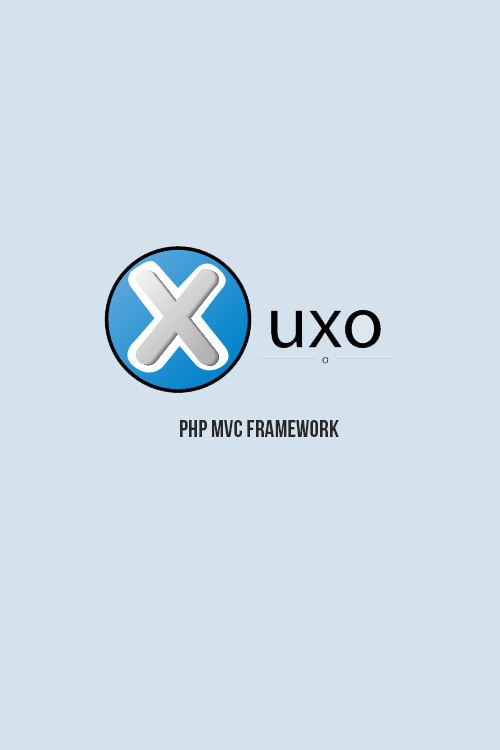
<style>
.page{position:relative;width:500px;height:750px;background:#d4e2ed}
.page>*{position:absolute;margin:0}
.t1{font:24px "BebasNeue";color:#282828}
</style>
<div class="page">
<p class="t1" style="left:180px;top:420px;width:159px;height:17px">PHP MVC FRAMEWORK</p>
</div>
